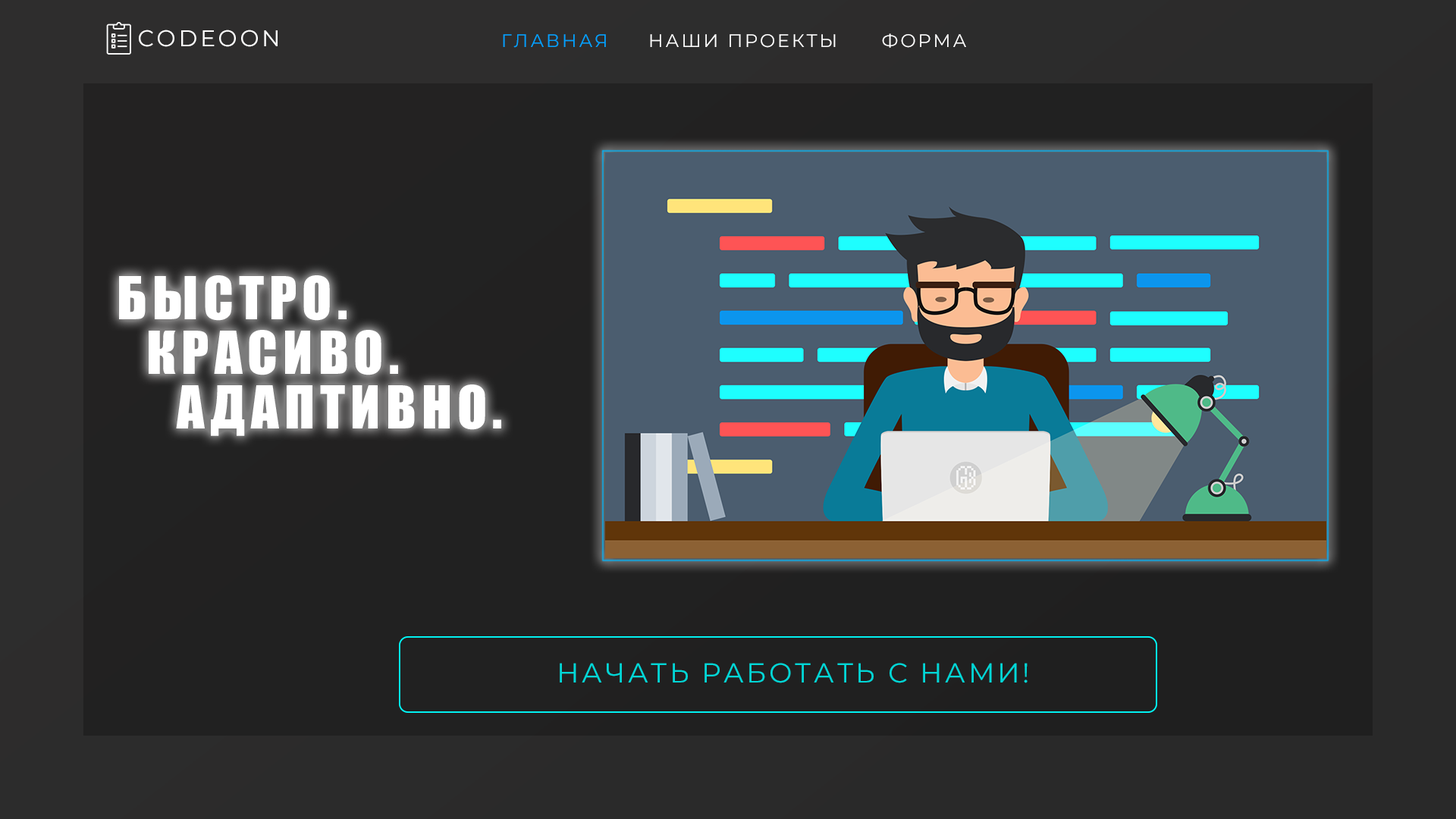
<style>
.page{position:relative;width:1456px;height:819px}
.page>*{position:absolute;margin:0}
.t1{font:22.7px "Montserrat-Regular";letter-spacing:0.12em;color:#ffffff;text-transform:uppercase}
.t2{font:18.2px "Montserrat-Regular";letter-spacing:0.12em;color:#00a2ff;text-transform:uppercase}
.t3{font:18.2px "Montserrat-Regular";letter-spacing:0.12em;color:#ffffff;text-transform:uppercase}
.t4{font:27.3px "Montserrat-Regular";letter-spacing:0.1em;color:#01d7d7;text-transform:uppercase}
</style>
<div class="page">
<p class="t1" style="left:139px;top:30px;width:139px;height:17px">codeoon</p>
<p class="t2" style="left:503px;top:34px;width:103px;height:14px">Главная</p>
<p class="t3" style="left:650px;top:34px;width:186px;height:14px">наши проекты</p>
<p class="t3" style="left:882px;top:33px;width:84px;height:15px">форма</p>
<p class="t4" style="left:560px;top:663px;width:468px;height:20px">начать работать с нами!</p>
</div>
